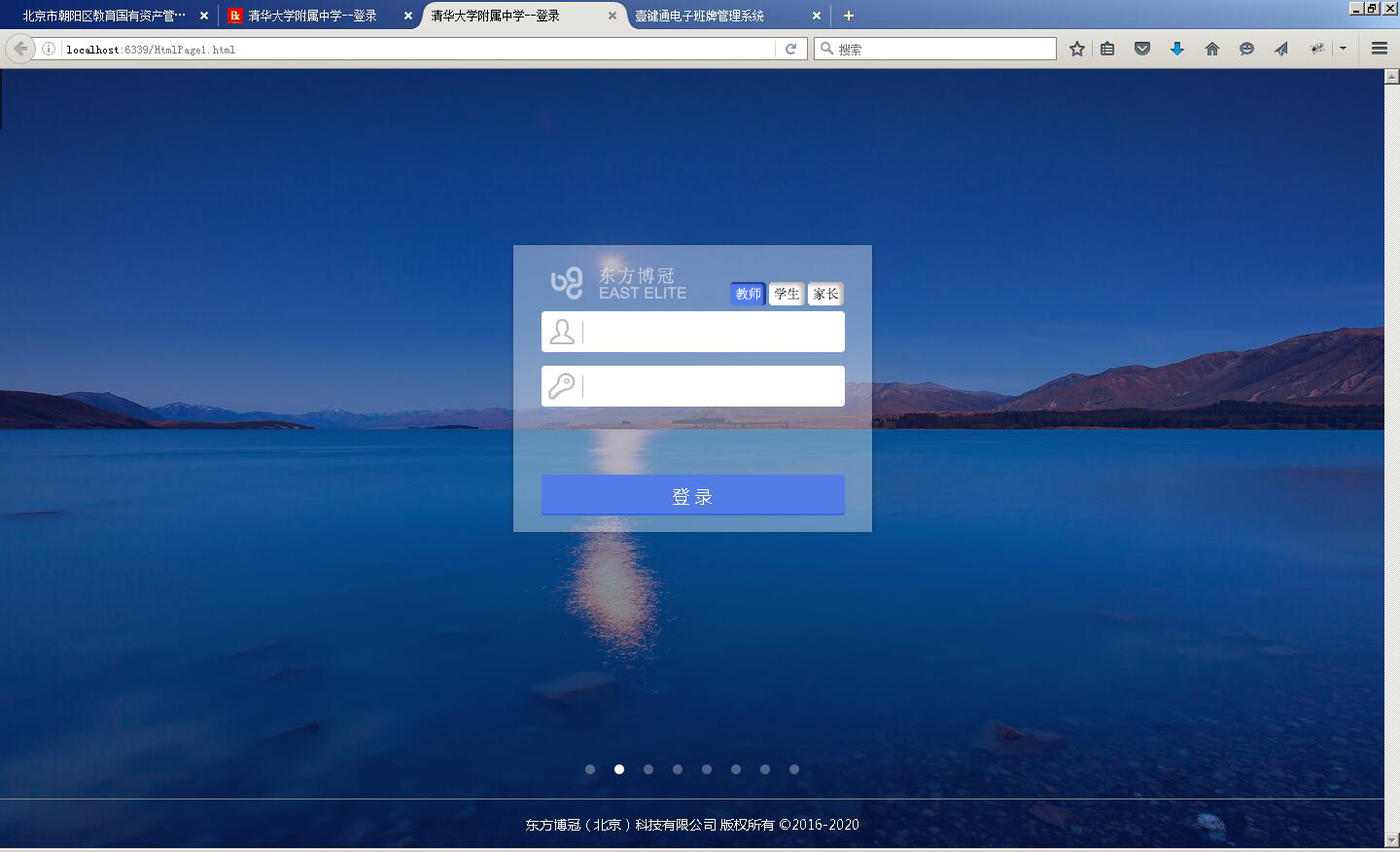
<style>
.page{position:relative;width:1400px;height:852px}
.page>*{position:absolute;margin:0}
.t1{font:18.1px "NSimSun";letter-spacing:0.075em;color:#cad3e4}
.t2{font:15.6px "ArialMT";color:#bac7dd}
.t3{font:13px "SimSun";color:#ffffff}
.t4{font:13px "SimSun";color:#000000}
</style>
<div class="page">
<p class="t1" style="left:599px;top:266px;width:75px;height:19px">东方博冠</p>
<p class="t2" style="left:600px;top:287px;width:86px;height:11px">EAST ELITE</p>
<p class="t3" style="left:736px;top:287px;width:25px;height:13px">教师</p>
<p class="t4" style="left:774px;top:287px;width:26px;height:13px">学生</p>
<p class="t4" style="left:813px;top:287px;width:26px;height:13px">家长</p>
</div>
